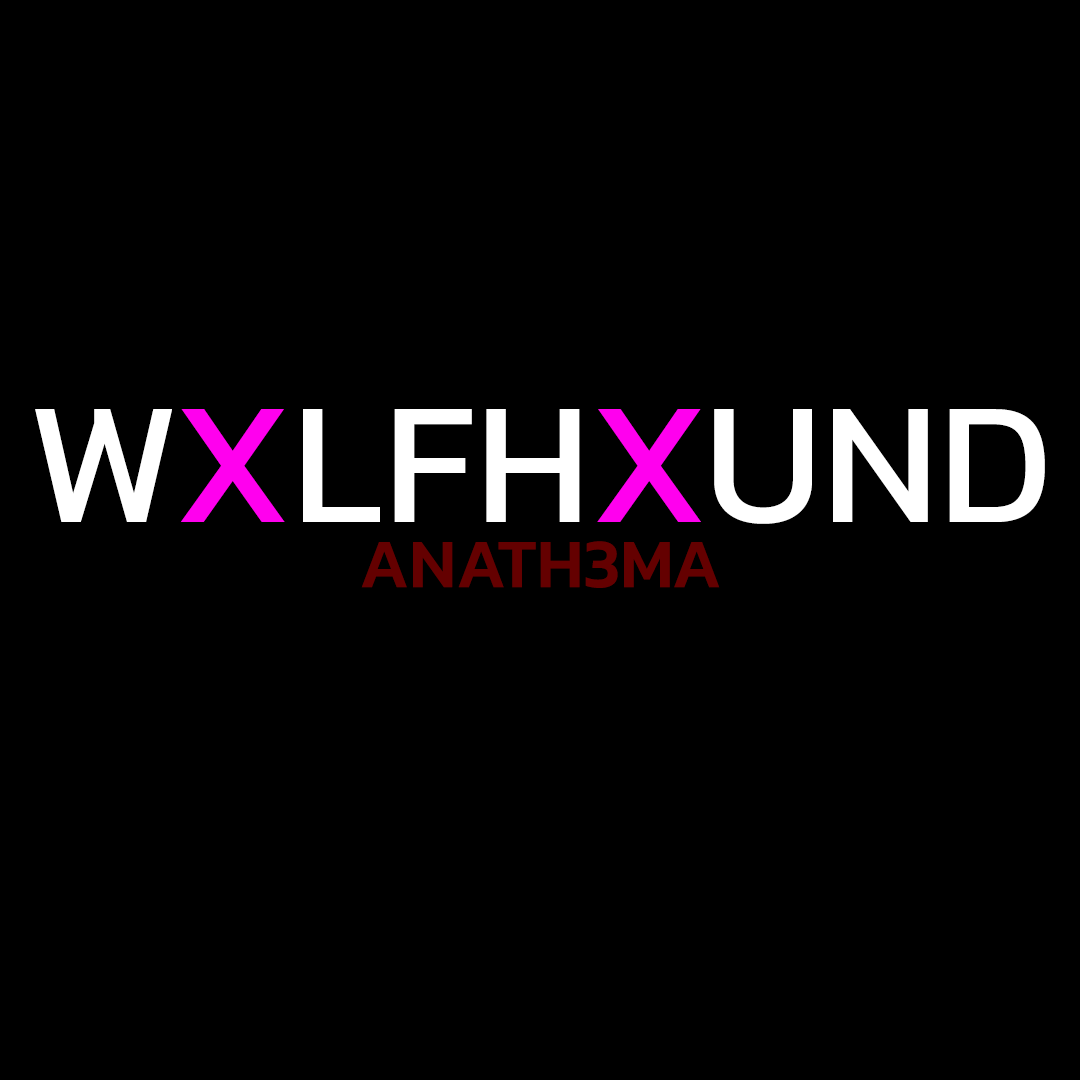
<style>
.page{position:relative;width:1080px;height:1080px;background:#000000}
.page>*{position:absolute;margin:0}
.t1{font:175px "Kanit-Regular";color:#ffffff}
.t2{font:175px "Kanit-Regular";color:#ff00ee}
.t3{font:70px "Kanit-Medium";color:#640000}
</style>
<div class="page">
<p class="t1" style="left:35px;top:409px;width:1010px;height:115px">W<span class="t2">X</span>LFH<span class="t2">X</span>UND</p>
<p class="t3" style="left:361px;top:541px;width:359px;height:47px">ANATH3MA</p>
</div>
